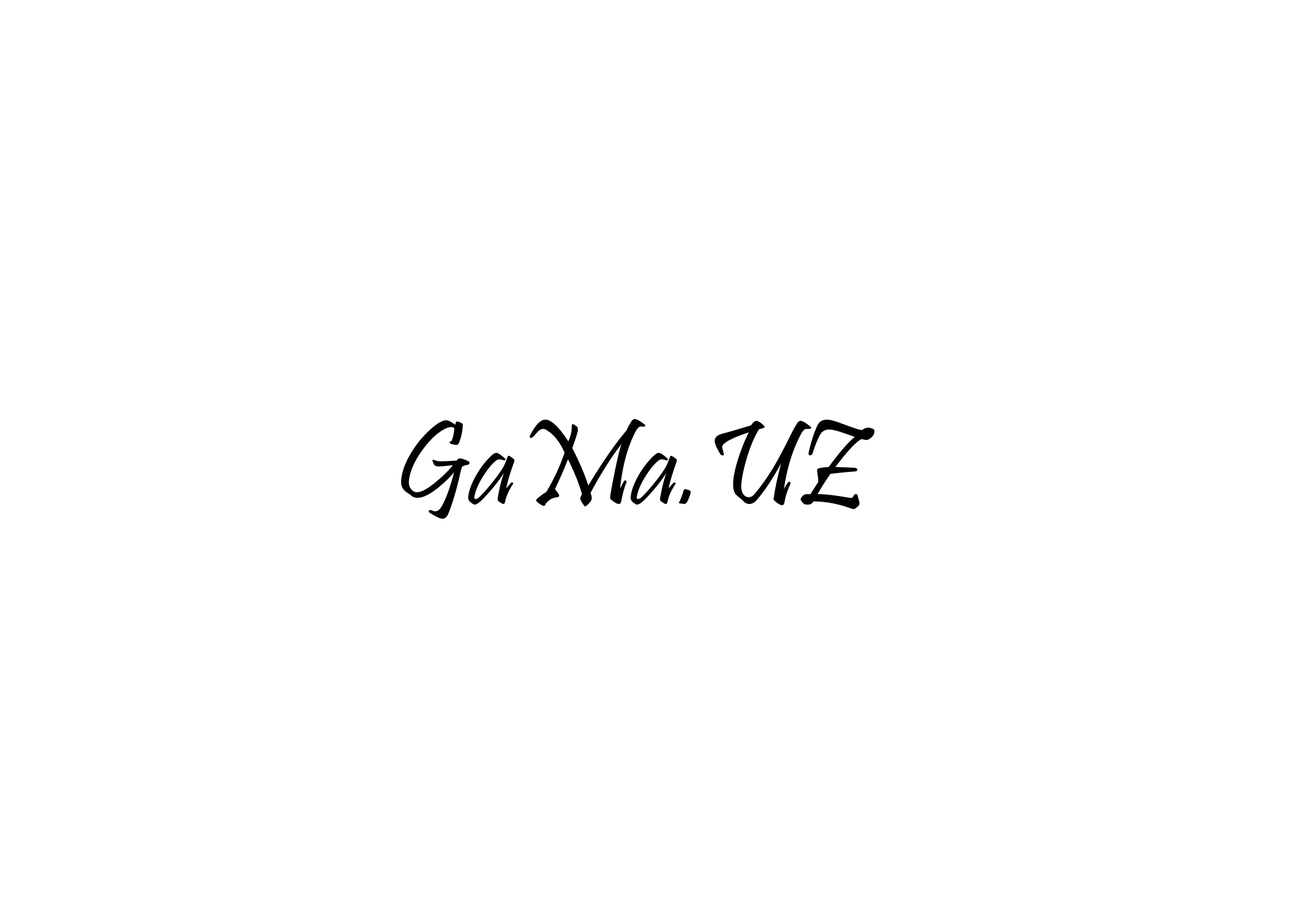
<style>
.page{position:relative;width:1292px;height:923px;background:#ffffff}
.page>*{position:absolute;margin:0}
.t1{font:123.1px "Pristina-Regular";color:#000000}
</style>
<div class="page">
<p class="t1" style="left:401px;top:419px;width:474px;height:100px">GaMa.UZ</p>
</div>
